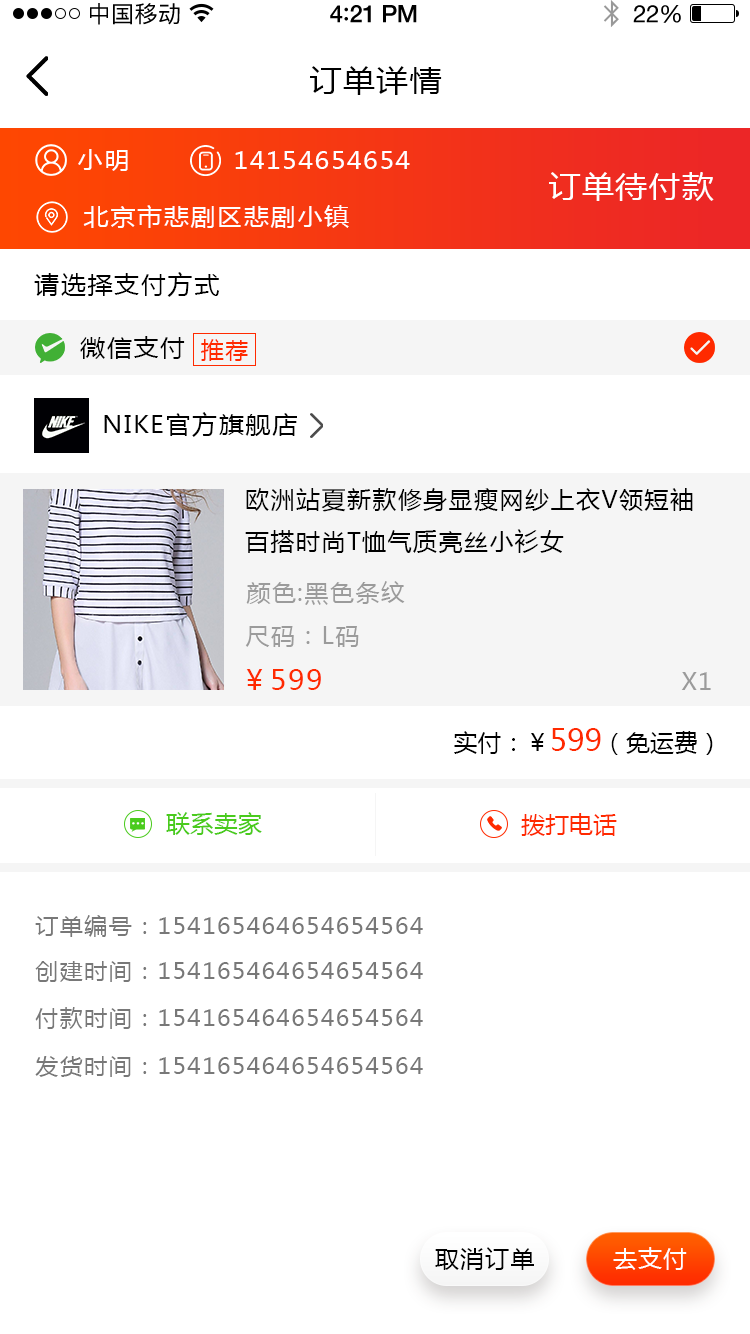
<style>
.page{position:relative;width:750px;height:1334px;background:#ffffff}
.page>*{position:absolute;margin:0}
.t1{font:23px "PingFangSC-Regular";letter-spacing:0.02em;color:#000000}
.t2{font:24px "HelveticaNeue-Medium";letter-spacing:-0.02em;color:#000000}
.t3{font:26px "Avenir-Medium";letter-spacing:-0.02em;color:#000000}
.t4{font:24px "HelveticaNeue";letter-spacing:-0.02em;color:#000000}
.t5{font:30px "MicrosoftYaHei";letter-spacing:0.05em;color:#000000;scale:1.06 1}
.t6{font:24px "MicrosoftYaHei";letter-spacing:0.05em;color:#ffffff;scale:1.06 1}
.t7{font:30px "MicrosoftYaHei";letter-spacing:0.05em;color:#ffffff;scale:1.06 1}
.t8{font:24px "MicrosoftYaHei";letter-spacing:0.05em;color:#000000;scale:1.06 1}
.t9{font:22px "MicrosoftYaHei";letter-spacing:0.05em;color:#ff2a00;scale:1.06 1}
.t10{font:24px "MicrosoftYaHei";letter-spacing:0.06em;color:#000000;text-transform:uppercase}
.t11{font:24px "MicrosoftYaHei";letter-spacing:0.06em;color:#9b9b9b;text-transform:uppercase}
.t12{font:28px "MicrosoftYaHei";letter-spacing:0.06em;color:#ff2a00;text-transform:uppercase}
.t13{font:24px "MicrosoftYaHei";color:#000000;text-transform:uppercase}
.t14{font:30px "MicrosoftYaHei";color:#ff2a00;text-transform:uppercase}
.t15{font:24px "MicrosoftYaHei";color:#4acb1d;text-transform:uppercase}
.t16{font:24px "MicrosoftYaHei";color:#ff2a00;text-transform:uppercase}
.t17{font:22px "MicrosoftYaHei";letter-spacing:0.05em;color:#787878;scale:1.06 1}
.t18{font:24px "MicrosoftYaHei";letter-spacing:0.05em;color:#000000;text-transform:uppercase}
.t19{font:24px "MicrosoftYaHei";letter-spacing:0.05em;color:#ffffff;text-transform:uppercase}
</style>
<div class="page">
<p class="t1" style="left:90px;top:3px;width:90px;height:22px">中国移动</p>
<p class="t2" style="left:330px;top:5px;width:87px;height:18px">4<span class="t3">:</span>21 PM</p>
<p class="t4" style="left:633px;top:5px;width:48px;height:18px">22%</p>
<p class="t5" style="left:310px;top:66px;width:132px;height:29px">订单详情</p>
<p class="t6" style="left:78px;top:149px;width:50px;height:22px">小明</p>
<p class="t6" style="left:235px;top:151px;width:175px;height:18px">14154654654</p>
<p class="t7" style="left:549px;top:172px;width:165px;height:29px">订单待付款</p>
<p class="t6" style="left:83px;top:205px;width:266px;height:23px">北京市悲剧区悲剧小镇</p>
<p class="t8" style="left:34px;top:272px;width:186px;height:25px">请选择支付方式</p>
<p class="t8" style="left:80px;top:336px;width:105px;height:23px">微信支付</p>
<p class="t9" style="left:201px;top:339px;width:47px;height:22px">推荐</p>
<p class="t8" style="left:104px;top:412px;width:193px;height:25px">NIKE官方旗舰店</p>
<p class="t10" style="left:245px;top:488px;width:448px;height:65px">欧洲站夏新款修身显瘦网纱上衣v领短袖百搭时尚t恤气质亮丝小衫女</p>
<p class="t11" style="left:246px;top:581px;width:159px;height:24px">颜色:黑色条纹</p>
<p class="t11" style="left:245px;top:626px;width:114px;height:21px">尺码：L码</p>
<p class="t12" style="left:246px;top:669px;width:75px;height:21px">￥599</p>
<p class="t11" style="left:681px;top:672px;width:30px;height:18px">x1</p>
<p class="t13" style="left:454px;top:728px;width:259px;height:27px">实付：￥<span class="t14">599</span>（免运费）</p>
<p class="t15" style="left:166px;top:812px;width:96px;height:23px">联系卖家</p>
<p class="t16" style="left:521px;top:813px;width:96px;height:23px">拨打电话</p>
<p class="t17" style="left:35px;top:915px;width:388px;height:22px">订单编号：154165464654654564</p>
<p class="t17" style="left:35px;top:961px;width:388px;height:21px">创建时间：154165464654654564</p>
<p class="t17" style="left:35px;top:1007px;width:388px;height:22px">付款时间：154165464654654564</p>
<p class="t17" style="left:35px;top:1056px;width:388px;height:21px">发货时间：154165464654654564</p>
<p class="t18" style="left:435px;top:1247px;width:99px;height:23px">取消订单</p>
<p class="t19" style="left:613px;top:1247px;width:74px;height:23px">去支付</p>
</div>
